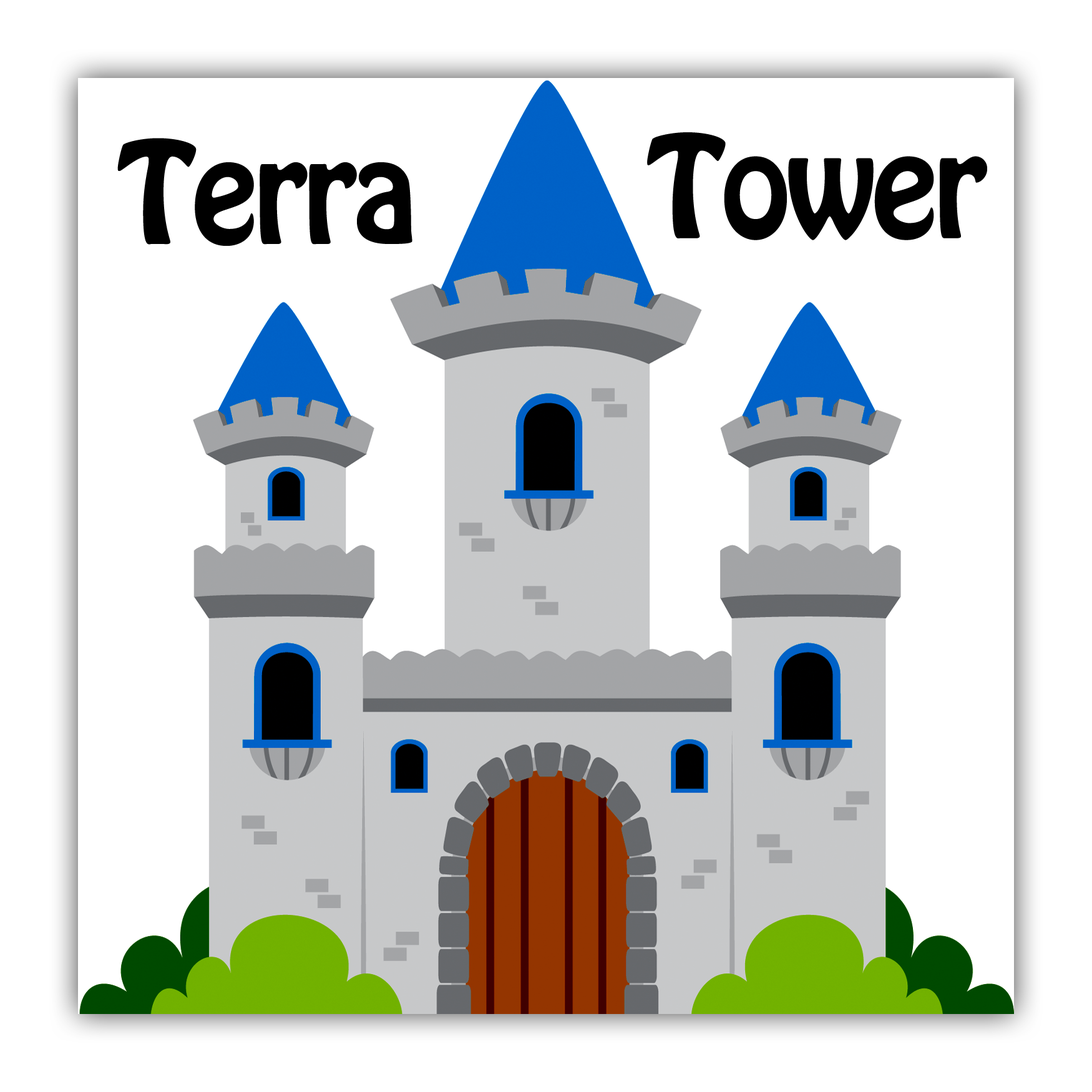
<style>
.page{position:relative;width:1092px;height:1092px;background:#ffffff}
.page>*{position:absolute;margin:0}
.t1{font:124.8px "HoboStd";letter-spacing:-0.03em;color:#000000}
</style>
<div class="page">
<p class="t1" style="left:117px;top:138px;width:295px;height:108px">Terra</p>
<p class="t1" style="left:647px;top:132px;width:340px;height:108px">Tower</p>
</div>
